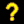
<style>
.page{position:relative;width:24px;height:24px;background:#000000}
.page>*{position:absolute;margin:0}
.t1{font:22.8px "MS Sans Serif";letter-spacing:0.072em;color:#ffff00}
</style>
<div class="page">
<p class="t1" style="left:6px;top:3px;width:12px;height:17px">?</p>
</div>
